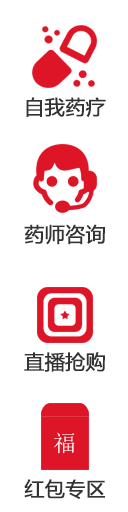
<style>
.page{position:relative;width:128px;height:512px;background:#ffffff}
.page>*{position:absolute;margin:0}
.t1{font:20px/127.3px "MicrosoftYaHei";color:#333333;font-weight:bold}
.t2{font:22.7px "NSimSun";color:#ffffff}
</style>
<div class="page">
<p class="t1" style="left:24px;top:97px;width:82px;height:402px;text-align:center">自我药疗<br>药师咨询<br>直播抢购<br>红包专区</p>
<p class="t2" style="left:54px;top:432px;width:21px;height:22px">福</p>
</div>
